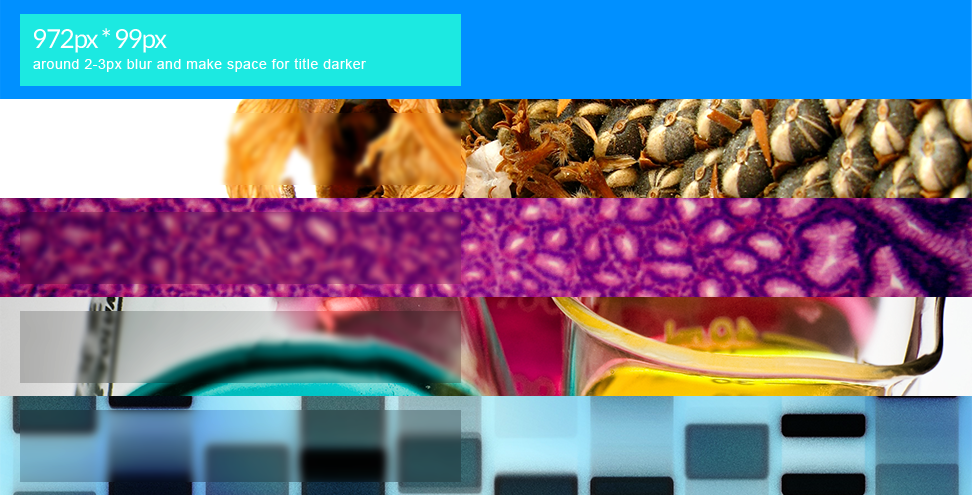
<style>
.page{position:relative;width:972px;height:495px}
.page>*{position:absolute;margin:0}
.t1{font:26px "Lato-Regular";letter-spacing:-0.05em;color:#ffffff}
.t2{font:14px "ArialMT";letter-spacing:0.04em;color:#ffffff}
</style>
<div class="page">
<p class="t1" style="left:34px;top:28px;width:133px;height:25px">972px * 99px</p>
<p class="t2" style="left:33px;top:58px;width:333px;height:14px">around 2-3px blur and make space for title darker</p>
</div>
